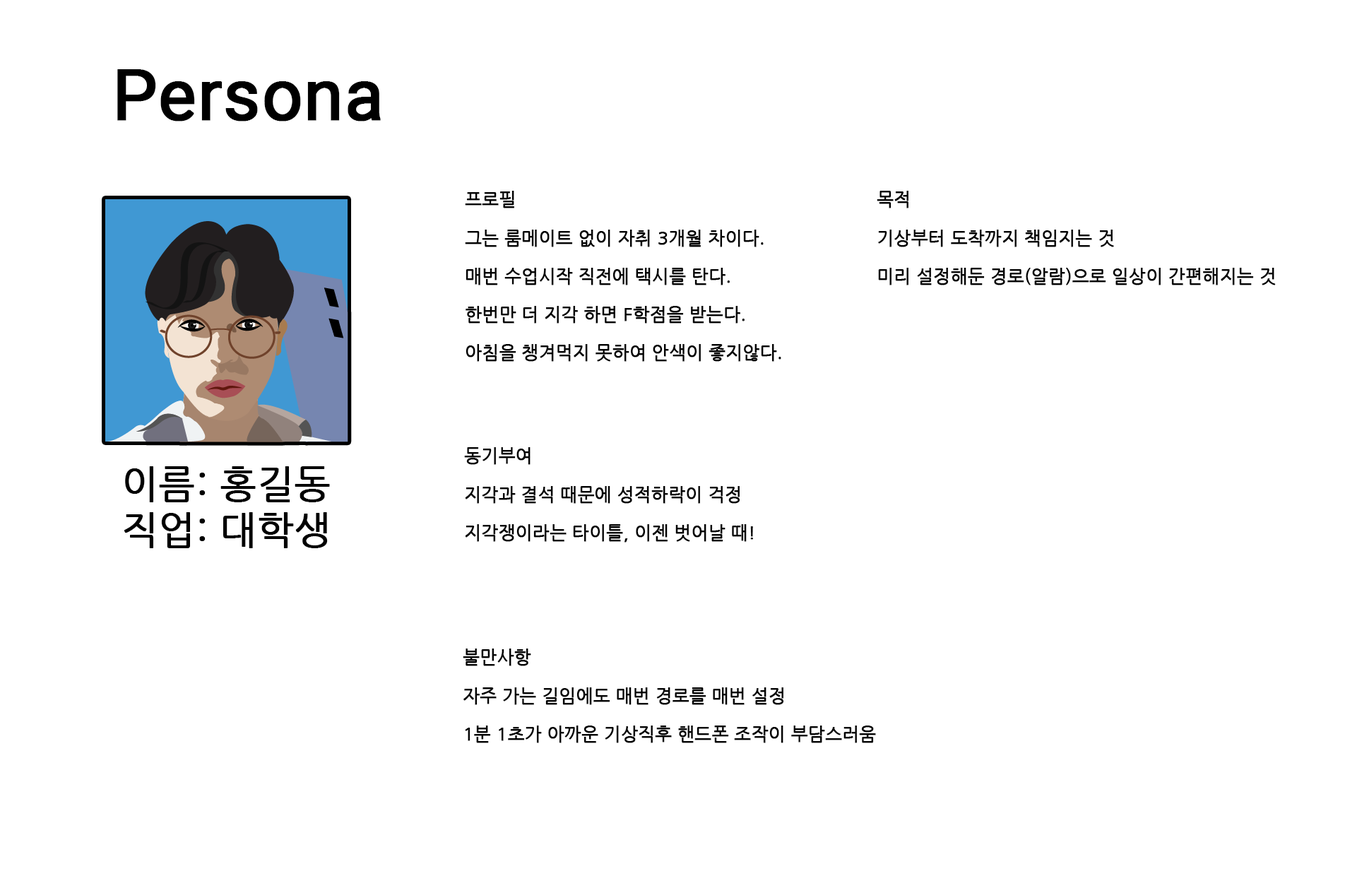
<style>
.page{position:relative;width:1362px;height:876px;background:#ffffff}
.page>*{position:absolute;margin:0}
.t1{font:70.6px "Roboto-Regular";color:#000000;font-weight:bold}
.t2{font:17.7px/38.3px "NanumGothic";color:#000000;font-weight:bold}
.t3{font:38.3px "NanumGothic";color:#000000;font-weight:bold}
</style>
<div class="page">
<p class="t1" style="left:117px;top:69px;width:264px;height:52px">Persona</p>
<p class="t2" style="left:465px;top:191px;width:316px;height:171px">프로필<br>그는 룸메이트 없이 자취 3개월 차이다.<br>매번 수업시작 직전에 택시를 탄다.<br>한번만 더 지각 하면 F학점을 받는다.<br>아침을 챙겨먹지 못하여 안색이 좋지않다.</p>
<p class="t2" style="left:876px;top:191px;width:399px;height:94px">목적<br>기상부터 도착까지 책임지는 것<br>미리 설정해둔 경로(알람)으로 일상이 간편해지는 것</p>
<p class="t2" style="left:464px;top:447px;width:289px;height:95px">동기부여<br>지각과 결석 때문에 성적하락이 걱정<br>지각쟁이라는 타이틀, 이젠 벗어날 때!</p>
<p class="t3" style="left:124px;top:466px;width:206px;height:82px">이름: 홍길동<br>직업: 대학생</p>
<p class="t2" style="left:463px;top:648px;width:413px;height:95px">불만사항<br>자주 가는 길임에도 매번 경로를 매번 설정<br>1분 1초가 아까운 기상직후 핸드폰 조작이 부담스러움</p>
</div>
